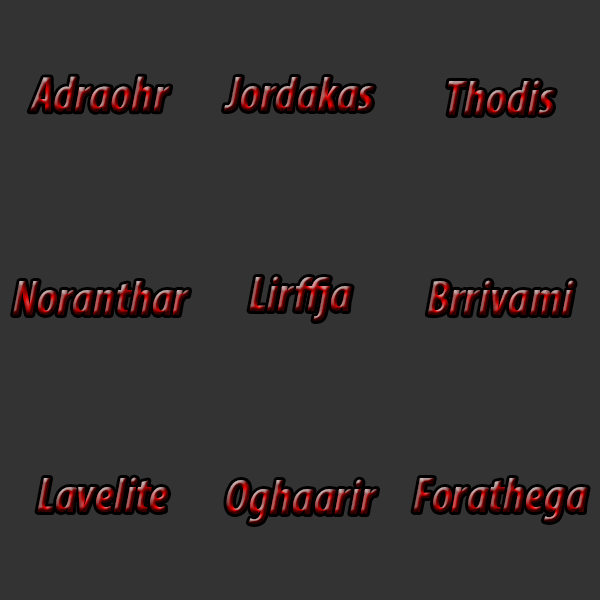
<style>
.page{position:relative;width:600px;height:600px;background:#333333}
.page>*{position:absolute;margin:0}
.t1{font:50px "MyriadPro-BoldCondIt"}
</style>
<div class="page">
<p class="t1" style="left:29px;top:76px;width:142px;height:36px">Adraohr</p>
<p class="t1" style="left:224px;top:77px;width:150px;height:34px">Jordakas</p>
<p class="t1" style="left:448px;top:80px;width:107px;height:35px">Thodis</p>
<p class="t1" style="left:13px;top:281px;width:177px;height:34px">Noranthar</p>
<p class="t1" style="left:249px;top:276px;width:103px;height:45px">Lirffja</p>
<p class="t1" style="left:427px;top:280px;width:148px;height:35px">Brrivami</p>
<p class="t1" style="left:37px;top:477px;width:131px;height:35px">Lavelite</p>
<p class="t1" style="left:226px;top:479px;width:152px;height:45px">Oghaarir</p>
<p class="t1" style="left:413px;top:478px;width:175px;height:44px">Forathega</p>
</div>
